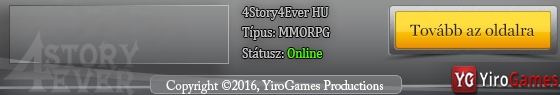
<style>
.page{position:relative;width:560px;height:95px}
.page>*{position:absolute;margin:0}
.t1{font:13.6px "Cambria";color:#c7c6c6;scale:0.92 1}
.t2{font:13.6px "Cambria";color:#4ffc03;scale:0.92 1}
.t3{font:27.2px "Georgia";color:#342509}
.t4{font:13.6px "ACaslonPro-Regular";color:#ffffff;scale:0.92 1}
</style>
<div class="page">
<p class="t1" style="left:242px;top:7px;width:88px;height:51px">4Story4Ever HU<br>Típus: MMORPG<br>Státusz: <span class="t2">Online</span></p>
<p class="t3" style="left:410px;top:23px;width:125px;height:14px">Tovább az oldalra</p>
<p class="t4" style="left:166px;top:80px;width:217px;height:14px">Copyright ©2016, YiroGames Productions</p>
</div>
